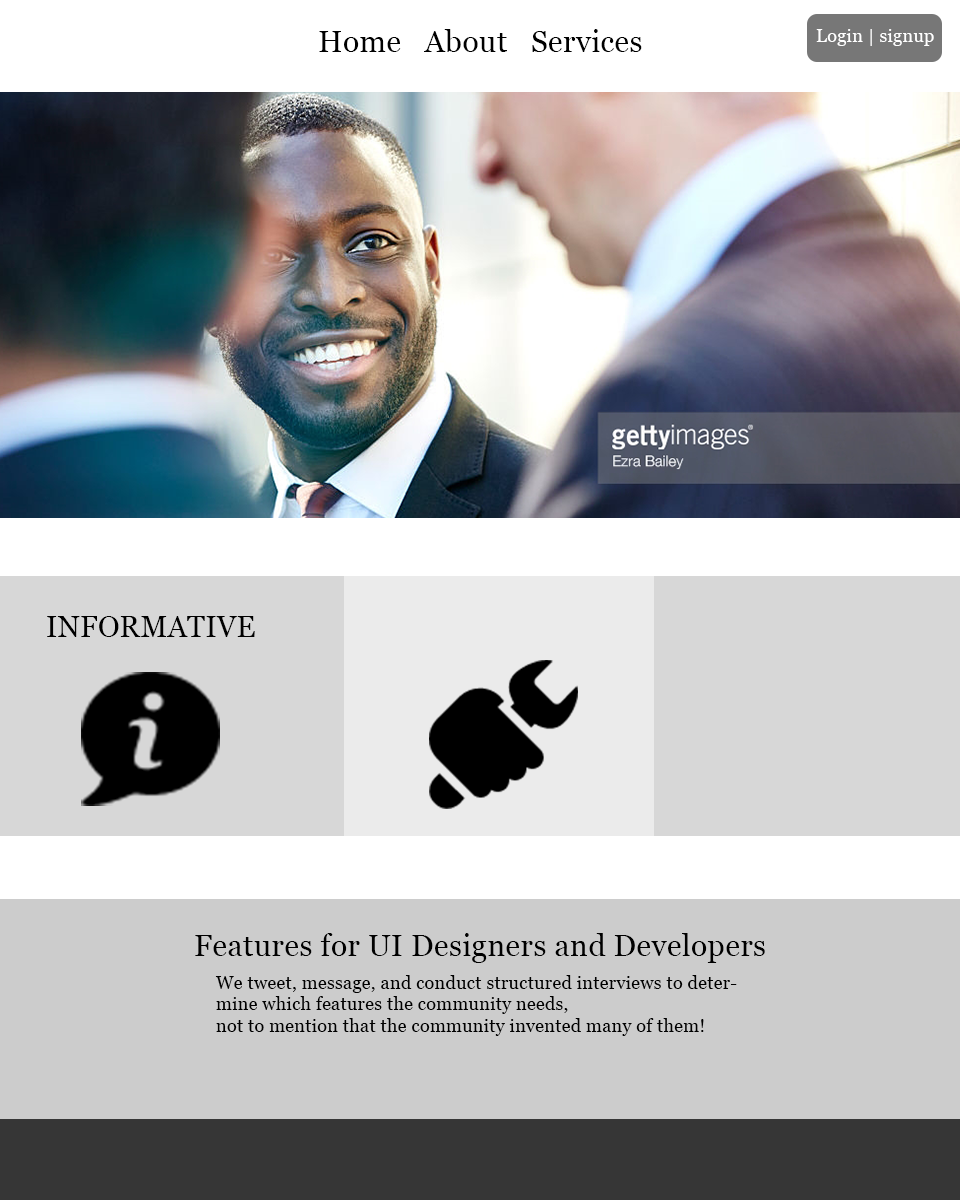
<style>
.page{position:relative;width:960px;height:1200px}
.page>*{position:absolute;margin:0}
.t1{font:30px "Georgia";letter-spacing:0.016em;color:#000000}
.t2{font:18px "Georgia";letter-spacing:0.016em;color:#ffffff}
.t3{font:28.7px "Georgia";letter-spacing:0.016em;color:#000000}
.t4{font:18px "Georgia";letter-spacing:0.016em;color:#000000}
</style>
<div class="page">
<p class="t1" style="left:319px;top:29px;width:323px;height:23px">Home   About   Services</p>
<p class="t2" style="left:816px;top:29px;width:118px;height:17px">Login | signup</p>
<p class="t3" style="left:47px;top:616px;width:208px;height:21px">INFORMATIVE</p>
<p class="t1" style="left:195px;top:933px;width:570px;height:30px">Features for UI Designers and Developers</p>
<p class="t4" style="left:215px;top:975px;width:522px;height:61px">We tweet, message, and conduct structured interviews to determine which features the community needs,<br>not to mention that the community invented many of them!</p>
</div>
